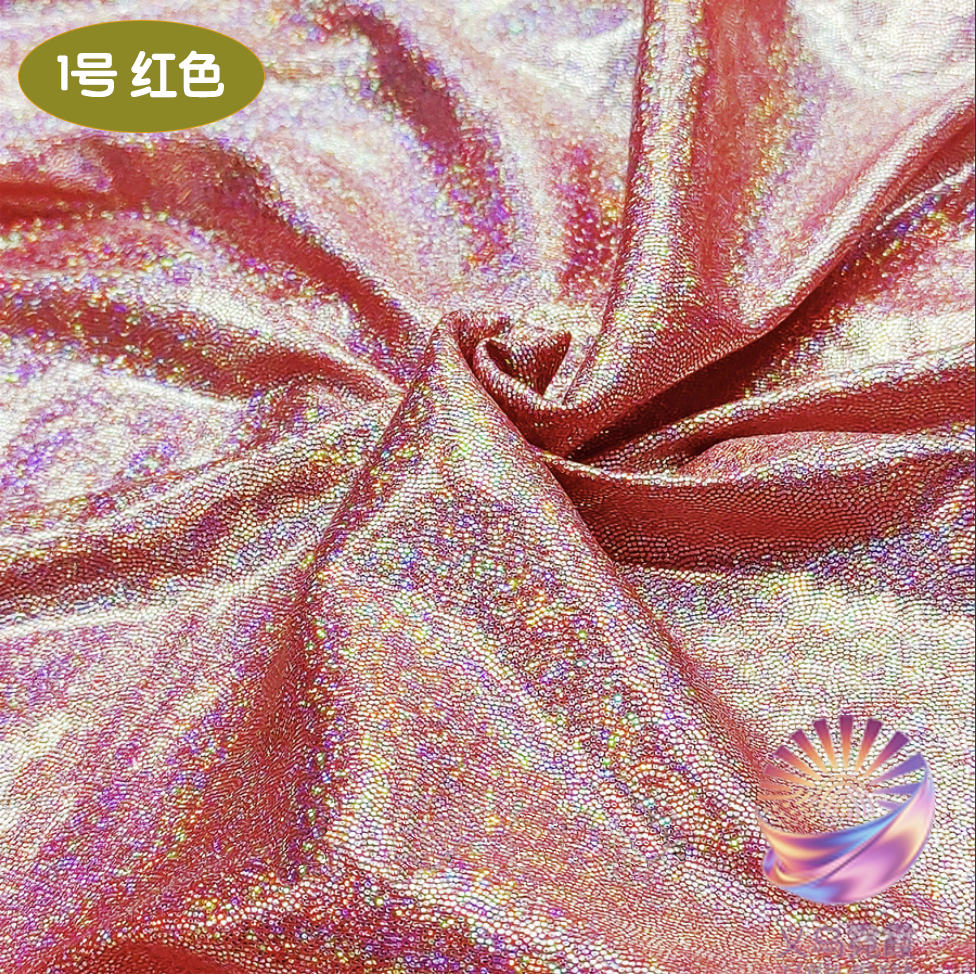
<style>
.page{position:relative;width:976px;height:974px}
.page>*{position:absolute;margin:0}
.t1{font:49.1px "STYuanti-SC-Bold";color:#ffffff;scale:0.97 1}
.t2{font:84.6px "STBaoliSC-Regular";color:#ffffff;scale:0.97 1}
</style>
<div class="page">
<p class="t1" style="left:57px;top:50px;width:167px;height:48px"><span class="t2">         </span>1号 红色</p>
</div>
